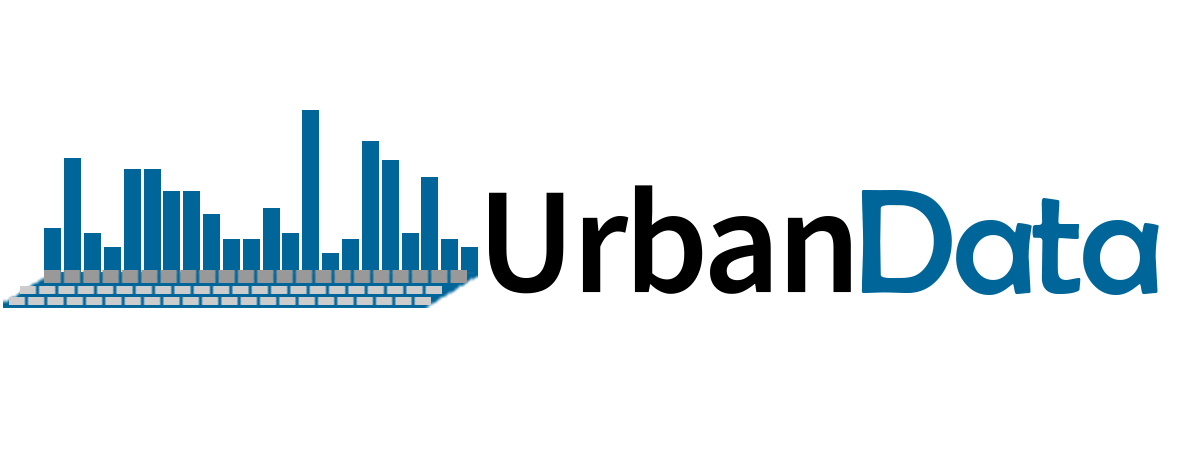
<style>
.page{position:relative;width:1181px;height:472px;background:#ffffff}
.page>*{position:absolute;margin:0}
.t1{font:151px "SourceSansPro-Semibold";letter-spacing:-0.025em;color:#000000}
.t2{font:151px "BerlinSansFB-Reg";letter-spacing:-0.025em;color:#006699}
</style>
<div class="page">
<p class="t1" style="left:489px;top:185px;width:362px;height:109px">Urban</p>
<p class="t2" style="left:861px;top:190px;width:298px;height:105px">Data</p>
</div>
